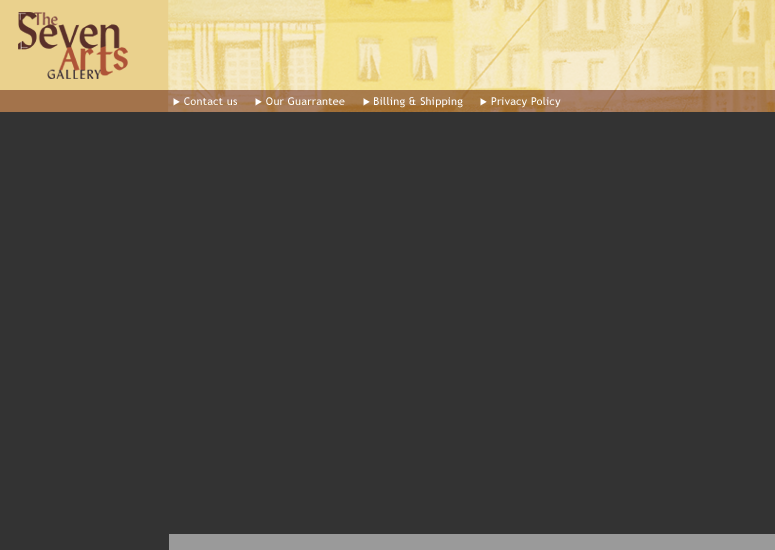
<style>
.page{position:relative;width:775px;height:550px;background:#333333}
.page>*{position:absolute;margin:0}
.t1{font:10.8px "TrebuchetMS";letter-spacing:0.025em;color:#ffffff}
</style>
<div class="page">
<p class="t1" style="left:184px;top:97px;width:377px;height:11px">Contact us        Our Guarrantee        Billing &amp; Shipping        Privacy Policy</p>
</div>
